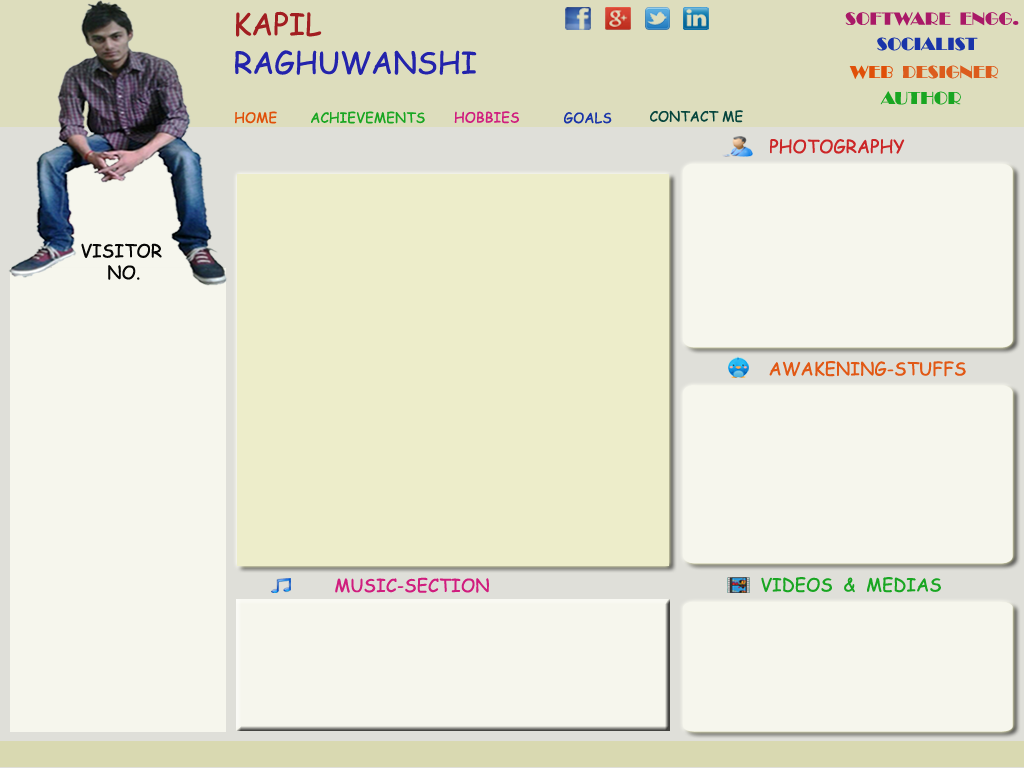
<style>
.page{position:relative;width:1024px;height:768px;background:#f6f6ed}
.page>*{position:absolute;margin:0}
.t1{font:30px "ComicSansMS";color:#a21e21}
.t2{font:30px "CalifornianFB-Reg";color:#a21e21}
.t3{font:18px "Broadway";color:#a91967}
.t4{font:18px "Broadway";color:#1934a9}
.t5{font:30px "ComicSansMS";color:#2323ac}
.t6{font:18px "Broadway";color:#dc5c1d}
.t7{font:18px "Broadway";color:#e05009}
.t8{font:18px "Broadway";color:#19a622}
.t9{font:14px "ComicSansMS";color:#e05009}
.t10{font:14px "ComicSansMS";color:#19a622}
.t11{font:14px "ComicSansMS";color:#d01d7e}
.t12{font:14px "ComicSansMS";color:#1934a9}
.t13{font:14px "ComicSansMS";color:#06453d}
.t14{font:18px "ComicSansMS";color:#cc2627}
.t15{font:18px "ComicSansMS";color:#060605}
.t16{font:18px "ComicSansMS";color:#e15815}
.t17{font:18px "ComicSansMS";color:#d01d7e}
.t18{font:18px "ComicSansMS";color:#19a622}
</style>
<div class="page">
<p class="t1" style="left:236px;top:11px;width:86px;height:26px"><span class="t2"> </span>KAPIL</p>
<p class="t3" style="left:845px;top:11px;width:174px;height:15px">SOFTWARE  ENGG.</p>
<p class="t4" style="left:877px;top:37px;width:101px;height:14px">SOCIALIST</p>
<p class="t5" style="left:235px;top:50px;width:242px;height:25px">RAGHUWANSHI</p>
<p class="t6" style="left:849px;top:65px;width:150px;height:14px"><span class="t7">WEB</span>  DESIGNER</p>
<p class="t8" style="left:880px;top:91px;width:81px;height:14px">AUTHOR</p>
<p class="t9" style="left:235px;top:111px;width:42px;height:13px">HOME</p>
<p class="t10" style="left:311px;top:111px;width:114px;height:13px">ACHIEVEMENTS</p>
<p class="t11" style="left:454px;top:111px;width:65px;height:13px">HOBBIES</p>
<p class="t12" style="left:564px;top:112px;width:48px;height:12px">GOALS</p>
<p class="t13" style="left:650px;top:110px;width:93px;height:13px">CONTACT ME</p>
<p class="t14" style="left:770px;top:139px;width:135px;height:15px">PHOTOGRAPHY</p>
<p class="t15" style="left:81px;top:243px;width:81px;height:37px">VISITOR <br>     NO.</p>
<p class="t16" style="left:769px;top:361px;width:197px;height:16px">AWAKENING-STUFFS</p>
<p class="t17" style="left:335px;top:577px;width:154px;height:16px">MUSIC-SECTION</p>
<p class="t18" style="left:761px;top:577px;width:180px;height:16px">VIDEOS  &amp;  MEDIAS</p>
</div>
